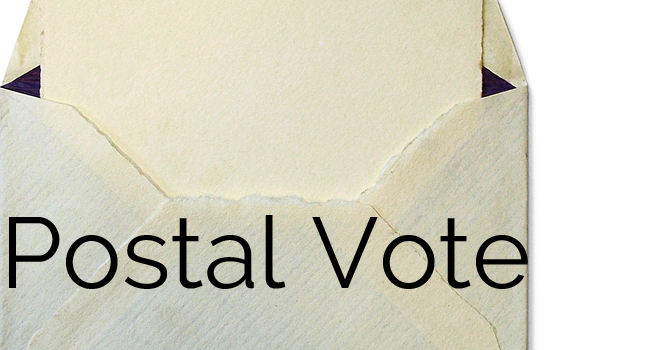
<style>
.page{position:relative;width:650px;height:350px}
.page>*{position:absolute;margin:0}
.t1{font:100px "Raleway-Regular";color:#000000}
</style>
<div class="page">
<p class="t1" style="left:9px;top:215px;width:519px;height:74px">Postal Vote</p>
</div>
